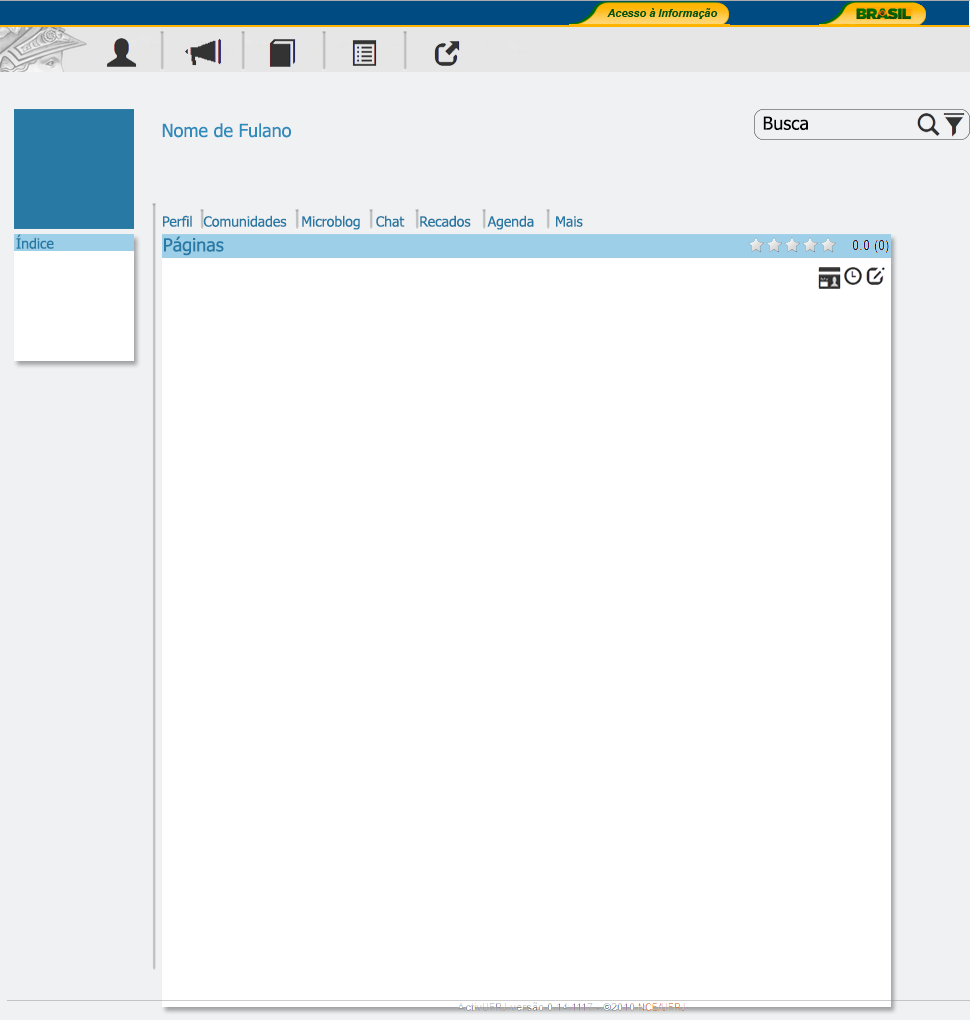
<style>
.page{position:relative;width:970px;height:1020px;background:#ffffff}
.page>*{position:absolute;margin:0}
.t1{font:18px "Tahoma";color:#2e8cbd}
.t2{font:18px "Tahoma";color:#040404}
.t3{font:14px "Tahoma";color:#2879a3}
.t4{font:18px "Tahoma";color:#2879a3}
</style>
<div class="page">
<p class="t1" style="left:162px;top:123px;width:129px;height:15px">Nome de Fulano</p>
<p class="t2" style="left:763px;top:116px;width:45px;height:15px">Busca</p>
<p class="t3" style="left:163px;top:215px;width:29px;height:12px">Perfil</p>
<p class="t3" style="left:203px;top:215px;width:84px;height:12px">Comunidades</p>
<p class="t3" style="left:302px;top:215px;width:58px;height:15px">Microblog</p>
<p class="t3" style="left:376px;top:215px;width:29px;height:12px">Chat</p>
<p class="t3" style="left:420px;top:215px;width:51px;height:12px">Recados</p>
<p class="t3" style="left:487px;top:215px;width:47px;height:15px">Agenda</p>
<p class="t3" style="left:556px;top:216px;width:27px;height:11px">Mais</p>
<p class="t3" style="left:16px;top:234px;width:38px;height:15px">Índice</p>
<p class="t4" style="left:164px;top:236px;width:60px;height:20px">Páginas</p>
</div>
